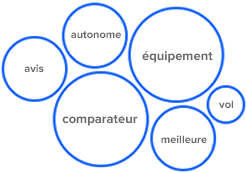
<style>
.page{position:relative;width:246px;height:172px;background:#ffffff}
.page>*{position:absolute;margin:0}
.t1{font:11px "ProximaNova-Bold";color:#6b6b6b}
.t2{font:13px "ProximaNova-Bold";color:#6b6b6b}
</style>
<div class="page">
<p class="t1" style="left:71px;top:31px;width:50px;height:8px">autonome</p>
<p class="t2" style="left:142px;top:51px;width:71px;height:12px">équipement</p>
<p class="t1" style="left:24px;top:64px;width:20px;height:9px">avis</p>
<p class="t1" style="left:219px;top:100px;width:14px;height:9px">vol</p>
<p class="t2" style="left:62px;top:115px;width:76px;height:11px">comparateur</p>
<p class="t1" style="left:161px;top:135px;width:46px;height:9px">meilleure</p>
</div>
